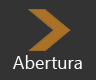
<style>
.page{position:relative;width:96px;height:80px;background:#333333}
.page>*{position:absolute;margin:0}
.t1{font:18px "SegoeUI";color:#fdfcfc}
</style>
<div class="page">
<p class="t1" style="left:13px;top:55px;width:69px;height:14px">Abertura</p>
</div>
